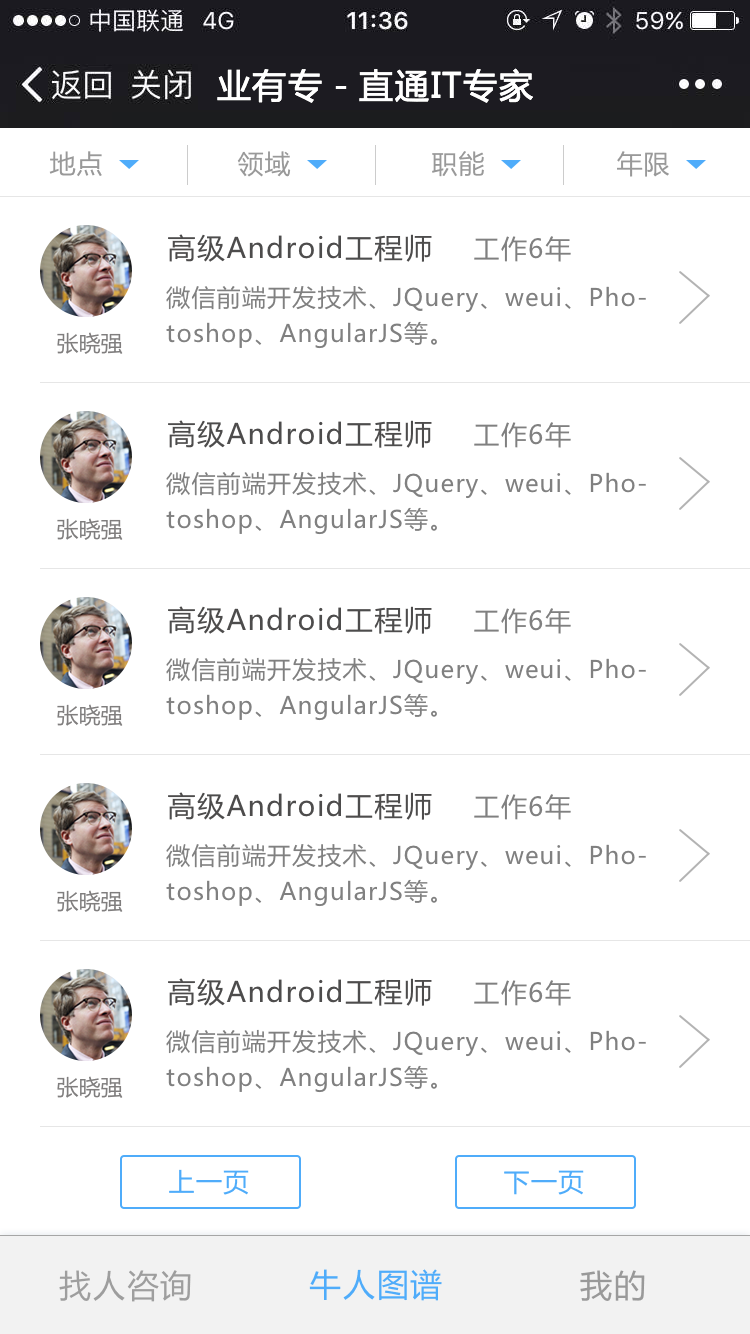
<style>
.page{position:relative;width:750px;height:1334px;background:#ffffff}
.page>*{position:absolute;margin:0}
.t1{font:34px "MicrosoftYaHei";letter-spacing:0.05em;color:#ffffff;text-transform:uppercase}
.t2{font:26px "MicrosoftYaHei";letter-spacing:0.05em;color:#999999}
.t3{font:28px "MicrosoftYaHei";letter-spacing:0.05em;color:#4d4c4c}
.t4{font:26px "MicrosoftYaHei";letter-spacing:0.05em;color:#808080}
.t5{font:24px/36px "MicrosoftYaHei";letter-spacing:0.05em;color:#808080}
.t6{font:22px "MicrosoftYaHei";color:#807e7e}
.t7{font:26px "MicrosoftYaHei";letter-spacing:0.05em;color:#4facfa}
.t8{font:32px "MicrosoftYaHei";letter-spacing:0.05em;color:#9e9e9e;text-transform:uppercase}
.t9{font:32px "MicrosoftYaHei";letter-spacing:0.05em;color:#4facfa;text-transform:uppercase}
.t10{font:32px "MicrosoftYaHei";letter-spacing:0.05em;color:#999999;text-transform:uppercase}
</style>
<div class="page">
<p class="t1" style="left:217px;top:68px;width:316px;height:35px">业有专－直通IT专家</p>
<p class="t2" style="left:49px;top:151px;width:53px;height:26px">地点</p>
<p class="t2" style="left:237px;top:151px;width:54px;height:26px">领域</p>
<p class="t2" style="left:432px;top:151px;width:52px;height:26px">职能</p>
<p class="t2" style="left:617px;top:151px;width:52px;height:26px">年限</p>
<p class="t3" style="left:168px;top:234px;width:264px;height:28px">高级Android工程师</p>
<p class="t4" style="left:474px;top:236px;width:97px;height:26px">工作6年</p>
<p class="t5" style="left:166px;top:285px;width:480px;height:64px">微信前端开发技术、JQuery、weui、Photoshop、AngularJS等。</p>
<p class="t6" style="left:57px;top:332px;width:66px;height:22px">张晓强</p>
<p class="t3" style="left:168px;top:420px;width:264px;height:28px">高级Android工程师</p>
<p class="t4" style="left:474px;top:422px;width:97px;height:26px">工作6年</p>
<p class="t5" style="left:166px;top:471px;width:480px;height:64px">微信前端开发技术、JQuery、weui、Photoshop、AngularJS等。</p>
<p class="t6" style="left:57px;top:518px;width:66px;height:22px">张晓强</p>
<p class="t3" style="left:168px;top:606px;width:264px;height:28px">高级Android工程师</p>
<p class="t4" style="left:474px;top:608px;width:97px;height:26px">工作6年</p>
<p class="t5" style="left:166px;top:657px;width:480px;height:64px">微信前端开发技术、JQuery、weui、Photoshop、AngularJS等。</p>
<p class="t6" style="left:57px;top:704px;width:66px;height:22px">张晓强</p>
<p class="t3" style="left:168px;top:792px;width:264px;height:28px">高级Android工程师</p>
<p class="t4" style="left:474px;top:794px;width:97px;height:26px">工作6年</p>
<p class="t5" style="left:166px;top:843px;width:480px;height:64px">微信前端开发技术、JQuery、weui、Photoshop、AngularJS等。</p>
<p class="t6" style="left:57px;top:890px;width:66px;height:22px">张晓强</p>
<p class="t3" style="left:168px;top:978px;width:264px;height:28px">高级Android工程师</p>
<p class="t4" style="left:474px;top:980px;width:97px;height:26px">工作6年</p>
<p class="t5" style="left:166px;top:1029px;width:480px;height:64px">微信前端开发技术、JQuery、weui、Photoshop、AngularJS等。</p>
<p class="t6" style="left:57px;top:1076px;width:66px;height:22px">张晓强</p>
<p class="t7" style="left:169px;top:1169px;width:80px;height:26px">上一页</p>
<p class="t7" style="left:504px;top:1170px;width:80px;height:25px">下一页</p>
<p class="t8" style="left:59px;top:1270px;width:132px;height:32px">找人咨询</p>
<p class="t9" style="left:309px;top:1269px;width:133px;height:32px">牛人图谱</p>
<p class="t10" style="left:580px;top:1270px;width:65px;height:31px">我的</p>
</div>
